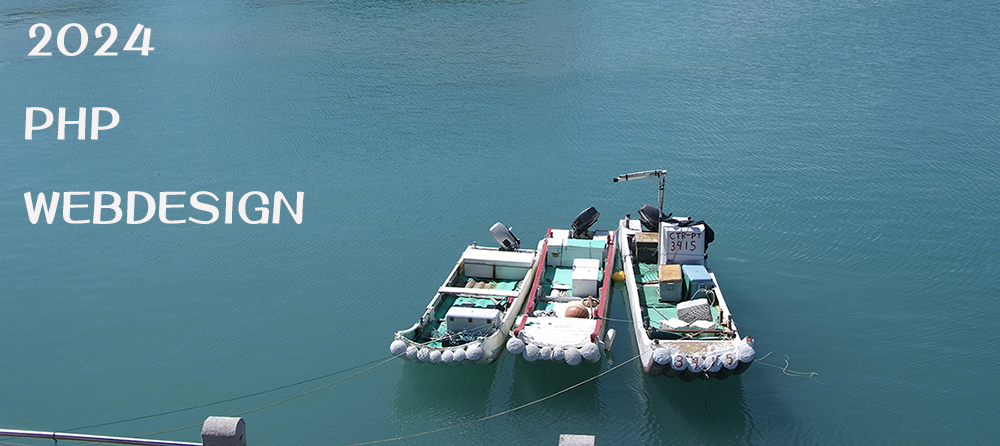
<style>
.page{position:relative;width:1000px;height:446px}
.page>*{position:absolute;margin:0}
.t1{font:48px "DFPOP3Std-W12";color:#f7f2f2}
</style>
<div class="page">
<p class="t1" style="left:23px;top:23px;width:281px;height:201px">2024<br>PHP <br>WEBDESIGN<br><br>WEB</p>
</div>
